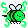
<style>
.page{position:relative;width:28px;height:28px;background:#ffffff}
.page>*{position:absolute;margin:0}
.t1{font:13.6px "BigNoodleTitling";letter-spacing:0.1em;color:#00ff60;scale:1.25 1}
</style>
<div class="page">
<p class="t1" style="left:0px;top:1px;width:8px;height:13px;rotate:-16deg">$</p>
<p class="t1" style="left:20px;top:0px;width:8px;height:12px;rotate:18deg">$</p>
<p class="t1" style="left:4px;top:16px;width:7px;height:12px;rotate:12deg">$</p>
<p class="t1" style="left:20px;top:15px;width:7px;height:13px;rotate:-11deg">$</p>
</div>
